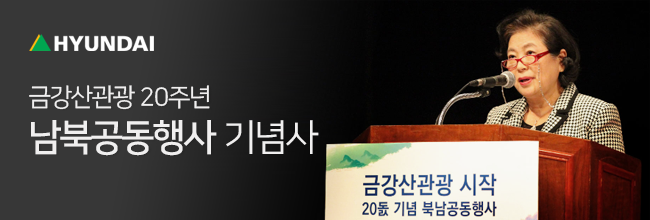
<style>
.page{position:relative;width:650px;height:220px}
.page>*{position:absolute;margin:0}
.t1{font:24.9px/43.7px "NanumSquare_acR";letter-spacing:-0.02em;color:#f0efef}
.t2{font:36.9px/43.7px "NanumSquare_acB";letter-spacing:-0.02em;color:#f0efef}
.t3{font:36.9px/43.7px "NanumSquare_acR";letter-spacing:-0.02em;color:#f0efef}
</style>
<div class="page">
<p class="t1" style="left:29px;top:85px;width:290px;height:71px">금강산관광 20주년<br><span class="t2">남북공동행사 </span><span class="t3">기념사</span></p>
</div>
